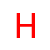
<style>
.page{position:relative;width:50px;height:50px;background:#ffffff}
.page>*{position:absolute;margin:0}
.t1{font:36px "MyriadPro-Regular";color:#ff0000}
</style>
<div class="page">
<p class="t1" style="left:16px;top:13px;width:19px;height:25px">H</p>
</div>
